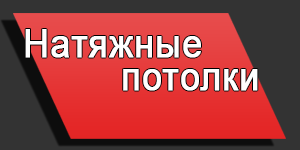
<style>
.page{position:relative;width:300px;height:150px;background:#333333}
.page>*{position:absolute;margin:0}
.t1{font:38.7px "ArialMT";letter-spacing:0.02em;color:#ffffff;font-weight:bold;scale:0.91 1}
</style>
<div class="page">
<p class="t1" style="left:25px;top:29px;width:176px;height:29px">Натяжные</p>
<p class="t1" style="left:123px;top:69px;width:135px;height:22px">потолки</p>
</div>
